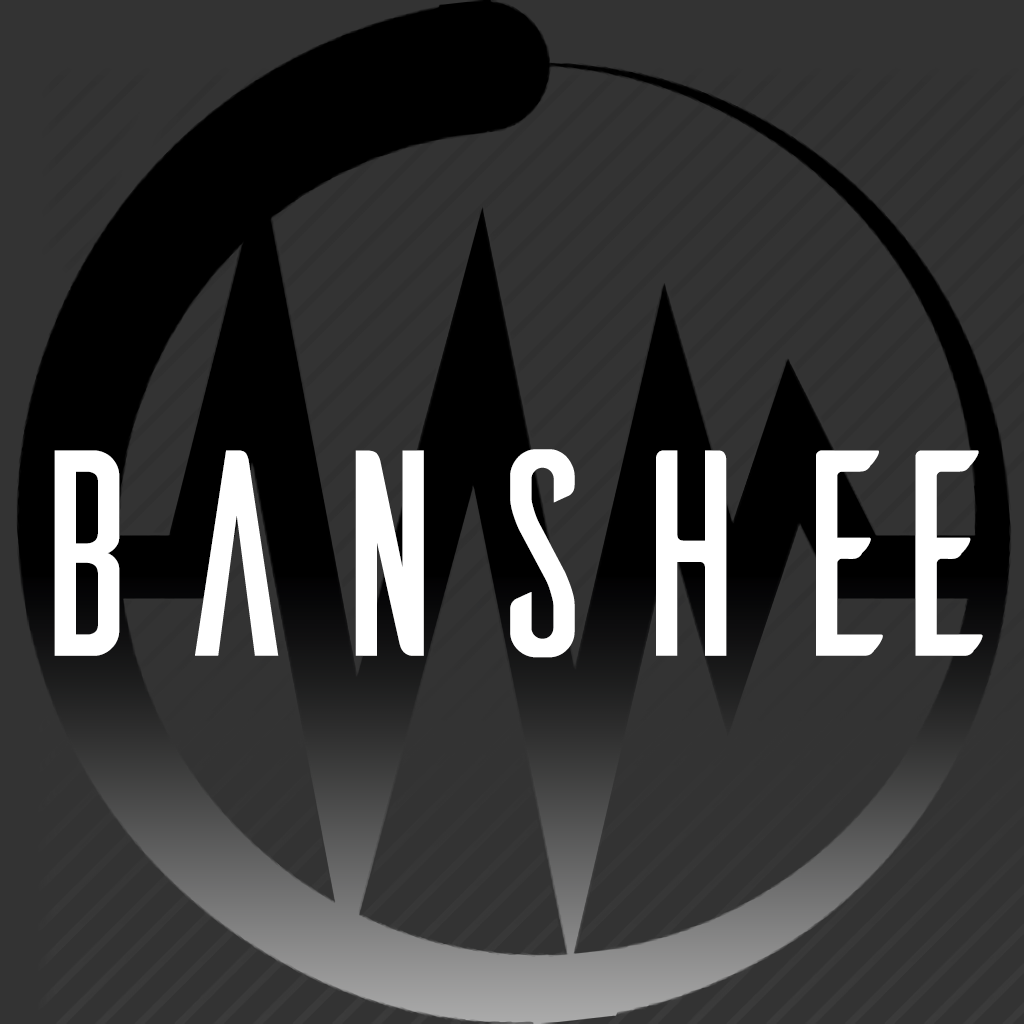
<style>
.page{position:relative;width:1024px;height:1024px;background:#333333}
.page>*{position:absolute;margin:0}
.t1{font:300px "Ailerons";letter-spacing:0.1em;color:#ffffff}
</style>
<div class="page">
<p class="t1" style="left:54px;top:449px;width:929px;height:209px">Banshee</p>
</div>
